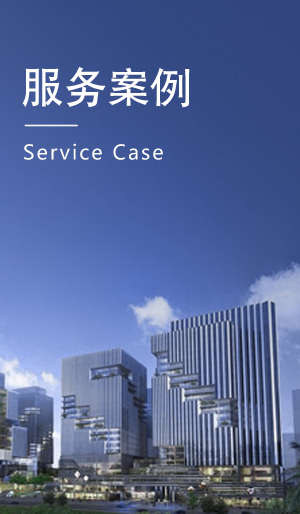
<style>
.page{position:relative;width:300px;height:514px}
.page>*{position:absolute;margin:0}
.t1{font:42px "HeitiCSEG-Medium-GB";letter-spacing:0.025em;color:#ffffff}
.t2{font:20px "MicrosoftYaHei";letter-spacing:0.1em;color:#ffffff}
</style>
<div class="page">
<p class="t1" style="left:22px;top:67px;width:168px;height:41px">服务案例</p>
<p class="t2" style="left:24px;top:143px;width:139px;height:17px">Service Case</p>
</div>
